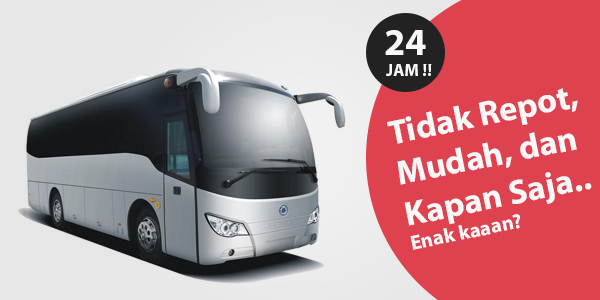
<style>
.page{position:relative;width:600px;height:300px;background:#de424f}
.page>*{position:absolute;margin:0}
.t1{font:17.2px "MyriadPro-Bold";color:#f8f8f8}
.t2{font:38.2px "MyriadPro-Bold";color:#f8f8f8}
.t3{font:34.5px "MyriadPro-Bold";color:#f8f8f8}
.t4{font:20.5px "MyriadPro-Bold";color:#f8f8f8}
</style>
<div class="page">
<p class="t1" style="left:385px;top:30px;width:47px;height:46px;text-align:center"><span class="t2">24 <br></span>JAM !!</p>
<p class="t3" style="left:387px;top:88px;width:205px;height:162px;rotate:-11deg">Tidak Repot,<br>Mudah, dan<br>Kapan Saja..<br><span class="t4">Enak kaaan?</span></p>
</div>
